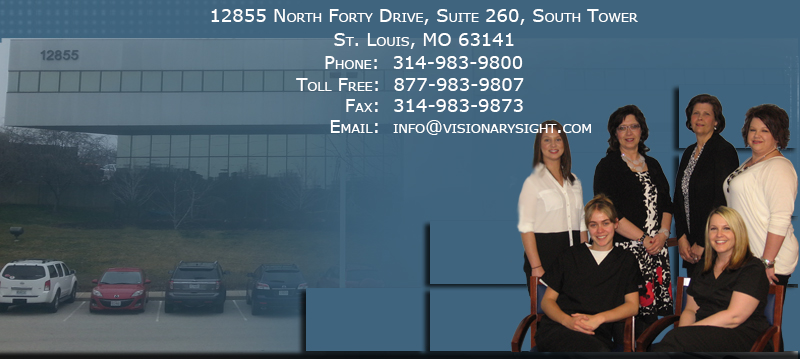
<style>
.page{position:relative;width:800px;height:359px}
.page>*{position:absolute;margin:0}
.t1{font:18px "Verdana";color:#ffffff;font-variant:small-caps}
</style>
<div class="page">
<p class="t1" style="left:211px;top:9px;width:427px;height:16px">12855 North Forty Drive, Suite 260, South Tower</p>
<p class="t1" style="left:334px;top:33px;width:180px;height:16px">St. Louis, MO 63141</p>
<p class="t1" style="left:325px;top:56px;width:198px;height:13px">Phone:  314-983-9800</p>
<p class="t1" style="left:296px;top:78px;width:228px;height:13px">Toll Free:  877-983-9807</p>
<p class="t1" style="left:346px;top:99px;width:177px;height:13px">Fax:  314-983-9873</p>
<p class="t1" style="left:330px;top:120px;width:261px;height:15px">Email:  info@visionarysight.com</p>
</div>
